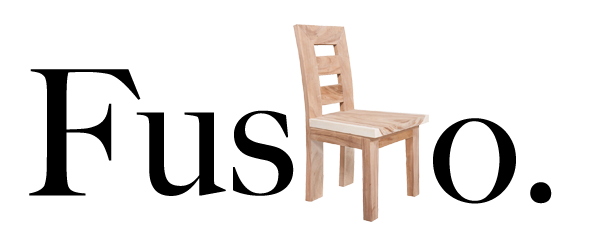
<style>
.page{position:relative;width:600px;height:250px;background:#ffffff}
.page>*{position:absolute;margin:0}
.t1{font:175px "BigCaslon-Medium";color:#000000}
</style>
<div class="page">
<p class="t1" style="left:29px;top:69px;width:265px;height:127px">Fus</p>
<p class="t1" style="left:433px;top:118px;width:119px;height:86px">o.</p>
</div>
